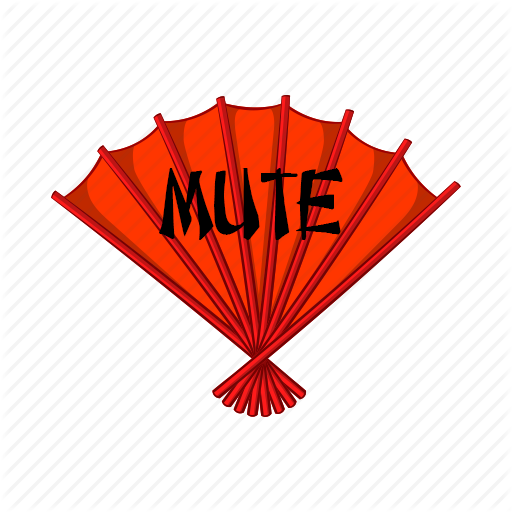
<style>
.page{position:relative;width:512px;height:512px;background:#ffffff}
.page>*{position:absolute;margin:0}
.t1{font:72px "ChineseTakeaway";color:#000000}
</style>
<div class="page">
<p class="t1" style="left:159px;top:168px;width:184px;height:72px">Mute</p>
</div>
